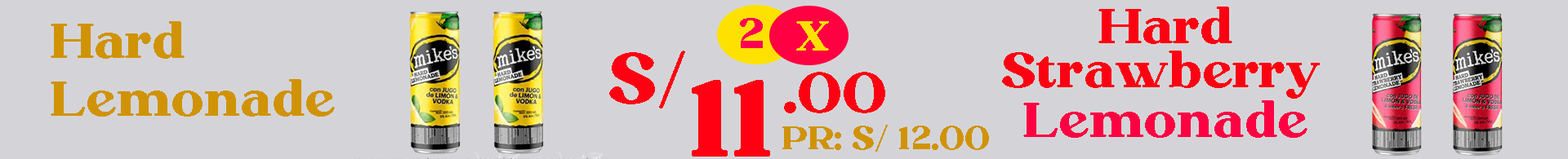
<style>
.page{position:relative;width:1568px;height:159px;background:#d4d4d8}
.page>*{position:absolute;margin:0}
.t1{font:41.5px "Megusto-Regular";color:#ff0054}
.t2{font:49px "Megusto-Regular";color:#ff0012}
.t3{font:49px "Megusto-Regular";color:#d09306}
.t4{font:41.5px "Megusto-Regular";color:#ffe100}
.t5{font:69.4px "Megusto-Regular";color:#ff0012}
.t6{font:57.2px "Megusto-Regular";color:#ff0012}
.t7{font:110.2px "Megusto-Regular";color:#ff0012}
.t8{font:49px "Megusto-Regular";color:#ff0042}
.t9{font:32.7px "Megusto-Regular";color:#d09306}
</style>
<div class="page">
<p class="t1" style="left:740px;top:18px;width:23px;height:30px">2</p>
<p class="t2" style="left:1098px;top:7px;width:134px;height:37px">Hard</p>
<p class="t3" style="left:51px;top:21px;width:134px;height:38px">Hard</p>
<p class="t4" style="left:796px;top:21px;width:33px;height:30px">X</p>
<p class="t5" style="left:609px;top:51px;width:76px;height:58px">S/</p>
<p class="t2" style="left:1002px;top:51px;width:318px;height:48px">Strawberry</p>
<p class="t6" style="left:784px;top:72px;width:101px;height:42px">.00</p>
<p class="t3" style="left:51px;top:79px;width:284px;height:38px">Lemonade</p>
<p class="t7" style="left:692px;top:80px;width:78px;height:77px">11</p>
<p class="t8" style="left:1023px;top:100px;width:284px;height:38px">Lemonade</p>
<p class="t9" style="left:782px;top:125px;width:207px;height:27px">PR: S/ 12.00</p>
</div>
